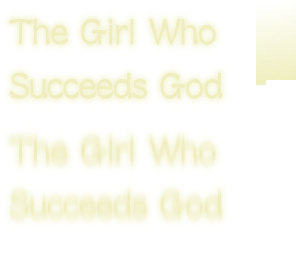
<style>
.page{position:relative;width:296px;height:256px;background:#ffffff}
.page>*{position:absolute;margin:0}
.t1{font:48.4px/54px "DFLeiShoStd-W5";letter-spacing:-0.035em;color:#efeebe;scale:0.82 1}
.t2{font:48.4px/54px "DFLeiShoStd-W5";letter-spacing:-0.05em;color:#efeebe;scale:0.82 1}
</style>
<div class="page">
<p class="t1" style="left:9px;top:18px;width:214px;height:81px">The Girl Who<br><span class="t2">Succeeds </span>God</p>
</div>
